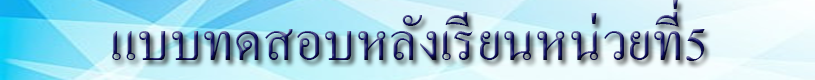
<style>
.page{position:relative;width:815px;height:80px}
.page>*{position:absolute;margin:0}
.t1{font:72px "AngsanaNew"}
</style>
<div class="page">
<p class="t1" style="left:112px;top:0px;width:593px;height:61px">แบบทดสอบหลังเรียนหน่วยที่5</p>
</div>
